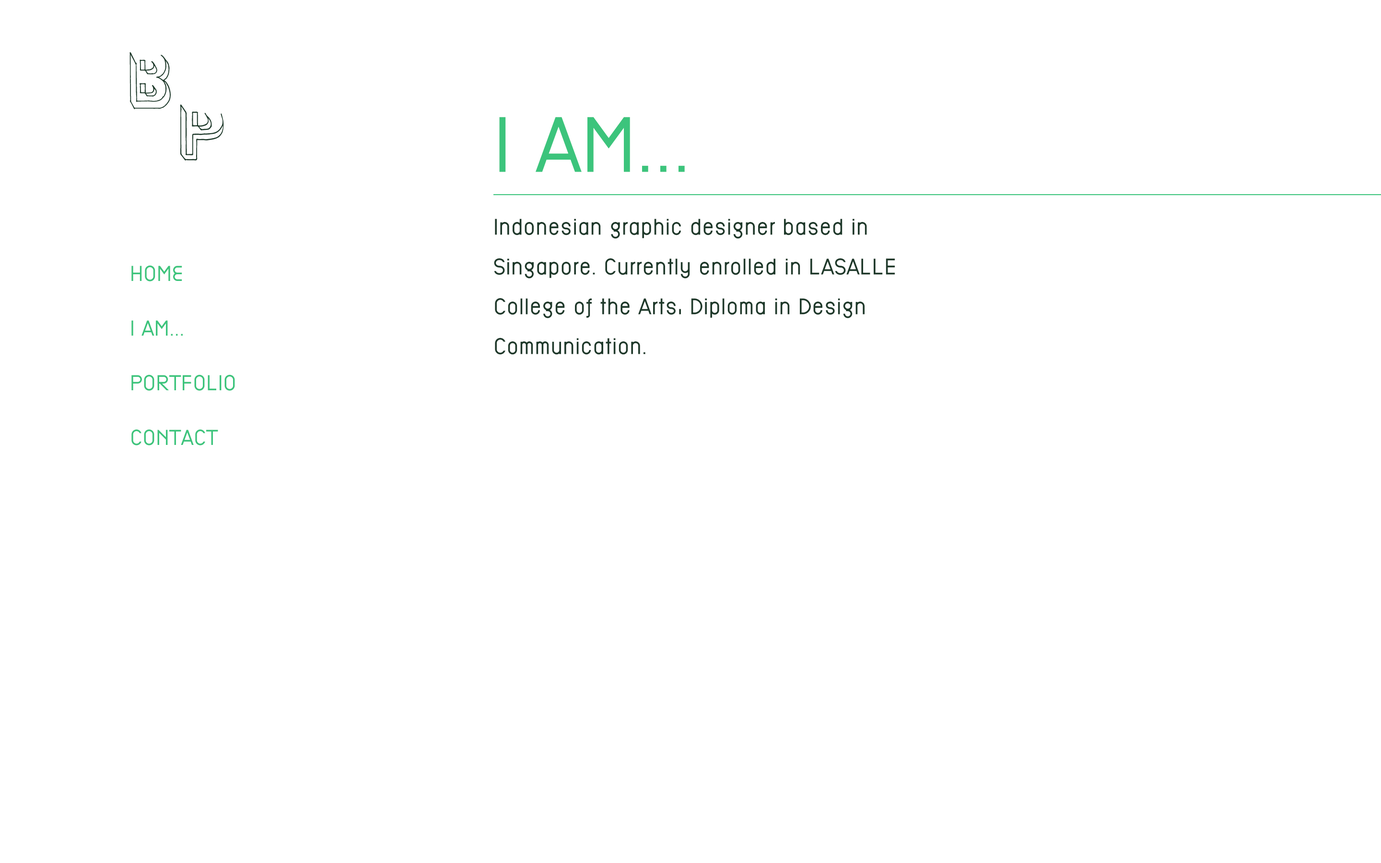
<style>
.page{position:relative;width:1381px;height:863px;background:#ffffff}
.page>*{position:absolute;margin:0}
.t1{font:72.9px "EPF-UC";color:#3cc47c}
.t2{font:21.1px/39.8px "EPF-UUL";color:#1e392a}
.t3{font:20.1px/54.7px "EPF-UC";color:#3cc47c}
</style>
<div class="page">
<p class="t1" style="left:499px;top:117px;width:186px;height:55px">I am...</p>
<p class="t2" style="left:494px;top:219px;width:401px;height:136px">Indonesian graphic designer based in Singapore. Currently enrolled in LASALLE College of the Arts, Diploma in Design Communication.</p>
<p class="t3" style="left:131px;top:265px;width:104px;height:181px">home<br>i am...<br>portfolio<br>contact</p>
</div>
